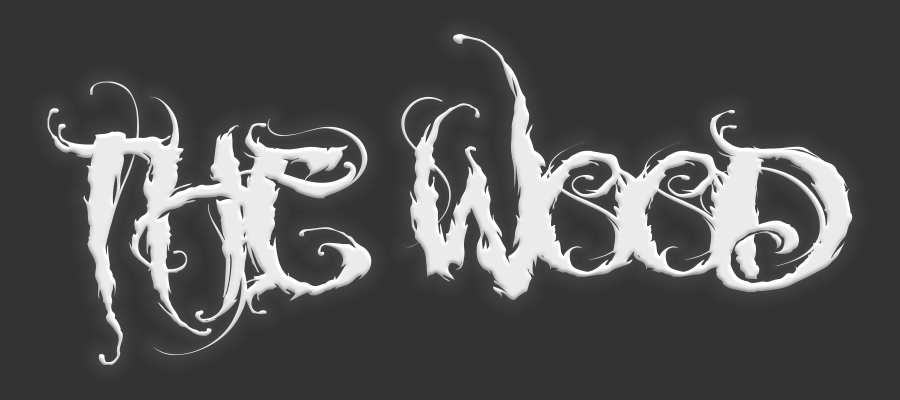
<style>
.page{position:relative;width:900px;height:400px;background:#333333}
.page>*{position:absolute;margin:0}
.t1{font:348.5px "MCF_funera";letter-spacing:-0.03em;color:#ffffff;scale:1.08 1}
</style>
<div class="page">
<p class="t1" style="left:47px;top:34px;width:806px;height:331px">the wood</p>
</div>
